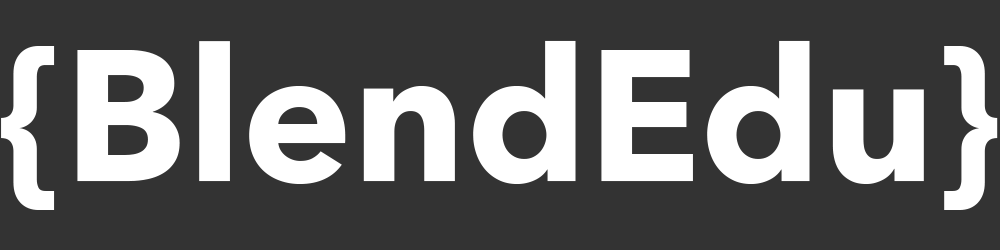
<style>
.page{position:relative;width:1000px;height:250px;background:#333333}
.page>*{position:absolute;margin:0}
.t1{font:185px "AvenirNext-Bold";color:#ffffff}
</style>
<div class="page">
<p class="t1" style="left:1px;top:40px;width:997px;height:170px">{BlendEdu}</p>
</div>
